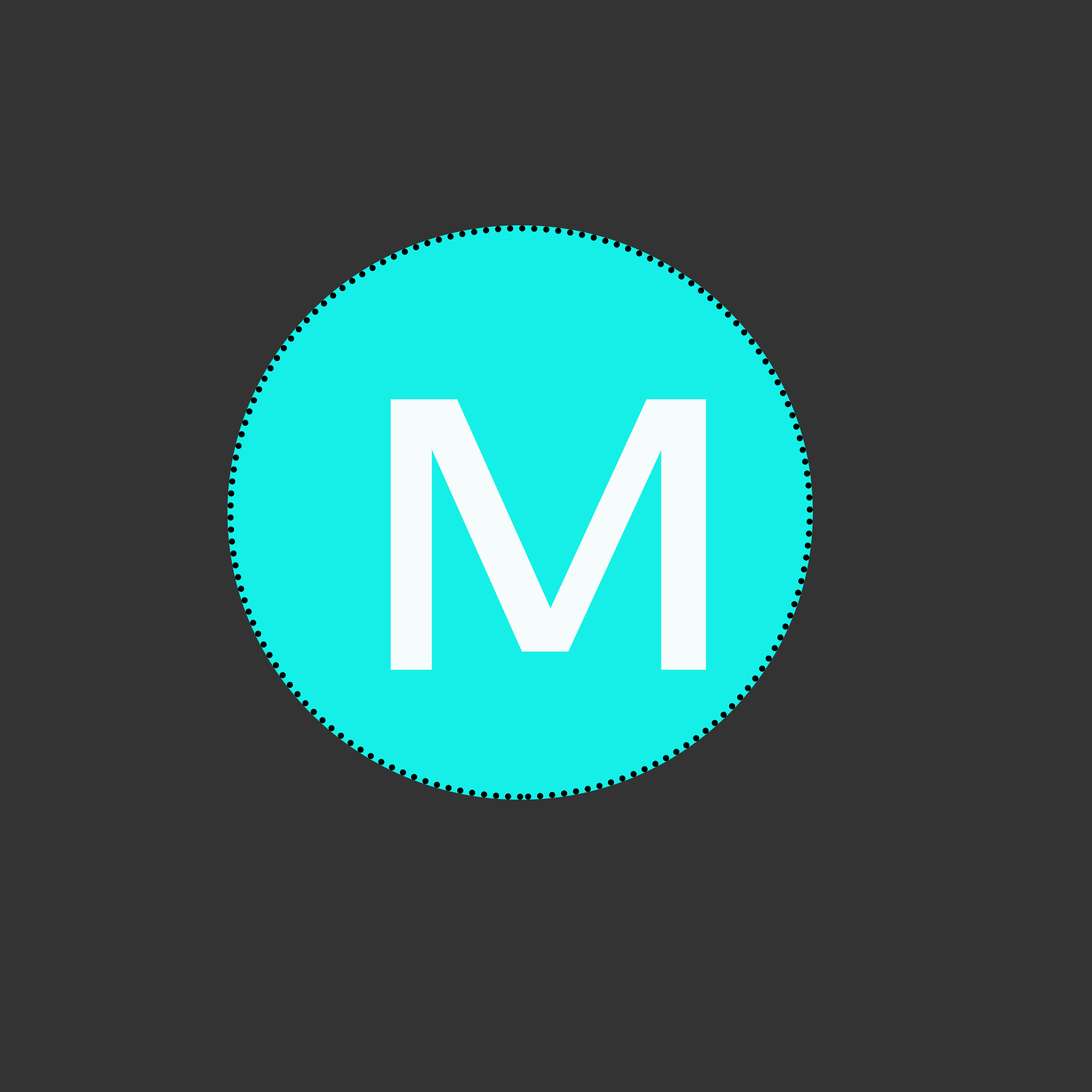
<style>
.page{position:relative;width:1092px;height:1092px;background:#333333}
.page>*{position:absolute;margin:0}
.t1{font:374.2px "LucidaSansUnicode";color:#f6fbfb;scale:1.25 1}
</style>
<div class="page">
<p class="t1" style="left:391px;top:399px;width:315px;height:271px">M</p>
</div>
